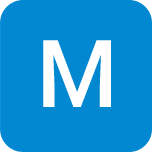
<style>
.page{position:relative;width:152px;height:152px;background:#0288d1}
.page>*{position:absolute;margin:0}
.t1{font:94px "Roboto-Medium";letter-spacing:-0.08em;color:#ffffff}
</style>
<div class="page">
<p class="t1" style="left:43px;top:40px;width:68px;height:67px">M</p>
</div>
